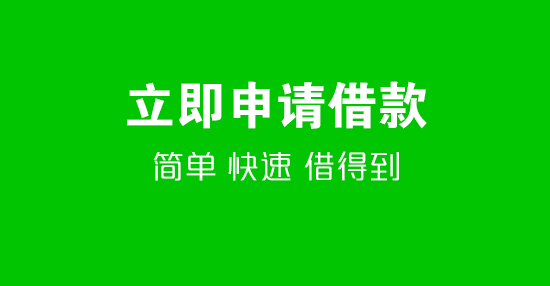
<style>
.page{position:relative;width:550px;height:286px;background:#01c501}
.page>*{position:absolute;margin:0}
.t1{font:50.6px "FZDHTJW--GB1-0";color:#ffffff}
.t2{font:30px "MFLangQian_Noncommercial-Light";letter-spacing:0.1em;color:#ffffff}
</style>
<div class="page">
<p class="t1" style="left:127px;top:81px;width:300px;height:48px">立即申请借款</p>
<p class="t2" style="left:153px;top:151px;width:246px;height:30px">简单 快速 借得到</p>
</div>
